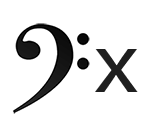
<style>
.page{position:relative;width:150px;height:135px;background:#ffffff}
.page>*{position:absolute;margin:0}
.t1{font:88.4px "MyriadPro-Regular";letter-spacing:-0.1em;color:#070707;scale:1.09 1}
</style>
<div class="page">
<p class="t1" style="left:95px;top:49px;width:43px;height:43px;opacity:0.9">x</p>
</div>
